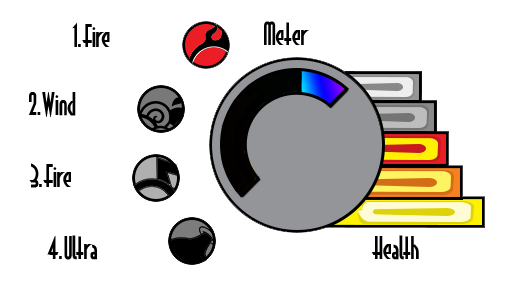
<style>
.page{position:relative;width:508px;height:292px;background:#ffffff}
.page>*{position:absolute;margin:0}
.t1{font:28px "Astrud";color:#000000}
</style>
<div class="page">
<p class="t1" style="left:72px;top:22px;width:38px;height:25px">1.Fire</p>
<p class="t1" style="left:264px;top:21px;width:45px;height:24px">Meter</p>
<p class="t1" style="left:28px;top:92px;width:48px;height:25px">2.Wind</p>
<p class="t1" style="left:29px;top:163px;width:42px;height:25px">3.Fire</p>
<p class="t1" style="left:47px;top:235px;width:50px;height:25px">4.Ultra</p>
<p class="t1" style="left:371px;top:235px;width:48px;height:25px">Health</p>
</div>
